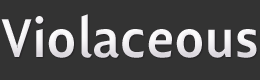
<style>
.page{position:relative;width:260px;height:80px;background:#333333}
.page>*{position:absolute;margin:0}
.t1{font:55px "LisboaSansOSF-Bold";letter-spacing:-0.015em;color:#ffffff}
</style>
<div class="page">
<p class="t1" style="left:1px;top:14px;width:256px;height:44px">Violaceous</p>
</div>
